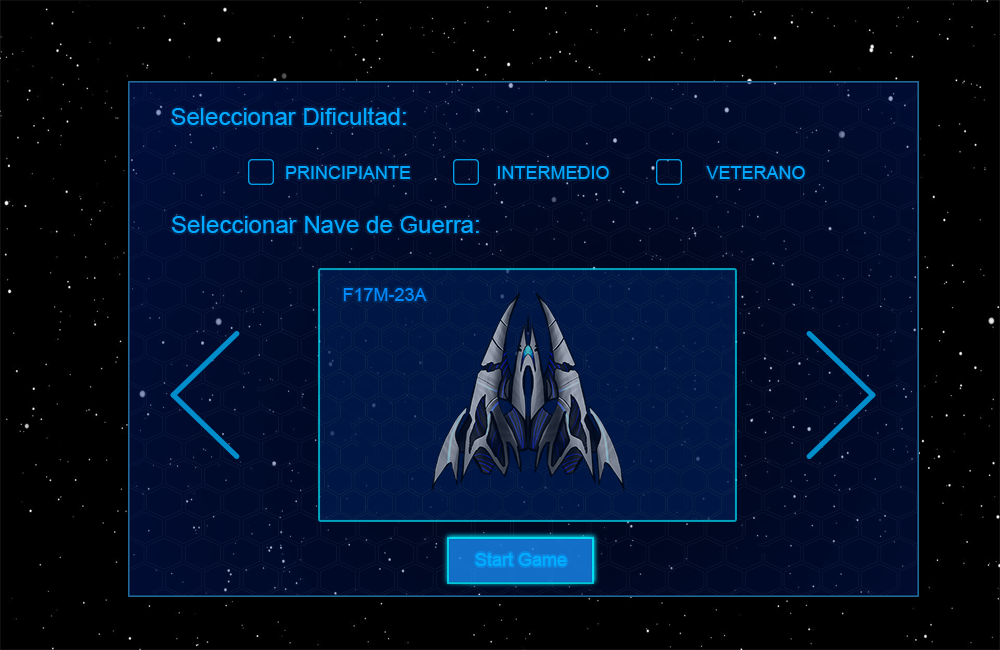
<style>
.page{position:relative;width:1000px;height:650px;background:#000000}
.page>*{position:absolute;margin:0}
.t1{font:24px "ArialMT";color:#00a8ff}
.t2{font:18px "ArialMT";color:#00a8ff}
.t3{font:18px "ArialMT";color:#008aff}
.t4{font:18px "ArialMT";color:#00aeff}
</style>
<div class="page">
<p class="t1" style="left:171px;top:107px;width:235px;height:18px">Seleccionar Dificultad:</p>
<p class="t2" style="left:286px;top:166px;width:125px;height:13px">PRINCIPIANTE</p>
<p class="t2" style="left:498px;top:166px;width:111px;height:13px">INTERMEDIO</p>
<p class="t2" style="left:706px;top:166px;width:99px;height:13px">VETERANO</p>
<p class="t1" style="left:172px;top:216px;width:307px;height:17px">Seleccionar Nave de Guerra:</p>
<p class="t3" style="left:343px;top:288px;width:84px;height:13px">F17M-23A</p>
<p class="t4" style="left:475px;top:553px;width:92px;height:13px">Start Game</p>
<p class="t4" style="left:475px;top:553px;width:92px;height:13px">Start Game</p>
</div>
